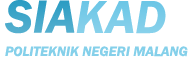
<style>
.page{position:relative;width:189px;height:57px;background:#ffffff}
.page>*{position:absolute;margin:0}
.t1{font:48px "FranklinGothic-DemiItalic";color:#41a6c9}
.t2{font:48px "FranklinGothic-DemiItalic";color:#67c4e5}
.t3{font:14px "FranklinGothic-DemiItalic";color:#85d0ea}
</style>
<div class="page">
<p class="t1" style="left:5px;top:0px;width:70px;height:34px">SIA</p>
<p class="t2" style="left:76px;top:1px;width:90px;height:33px">KAD</p>
<p class="t3" style="left:5px;top:46px;width:183px;height:11px">POLITEKNIK NEGERI MALANG</p>
</div>
